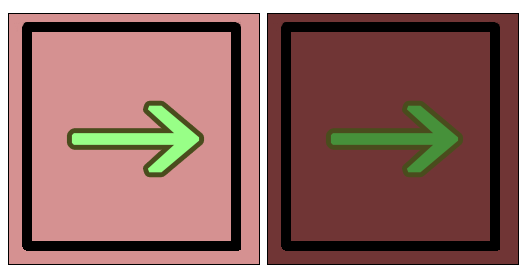
<style>
.page{position:relative;width:525px;height:275px;background:#d59191}
.page>*{position:absolute;margin:0}
.t1{font:150px "BIZ-UDMincho-Medium";color:#98ff87;font-weight:bold}
.t2{font:150px "BIZ-UDMincho-Medium";color:#46913a;font-weight:bold}
</style>
<div class="page">
<p class="t1" style="left:71px;top:105px;width:129px;height:68px;rotate:-90deg">↑</p>
<p class="t2" style="left:330px;top:105px;width:129px;height:68px;rotate:-90deg">↑</p>
</div>
